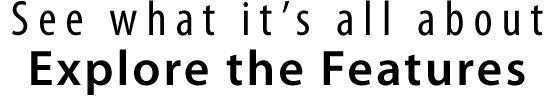
<style>
.page{position:relative;width:553px;height:99px;background:#ffffff}
.page>*{position:absolute;margin:0}
.t1{font:50px "MyriadPro-Cond";letter-spacing:0.18em;color:#000000}
.t2{font:50px/50px "MyriadPro-Semibold";letter-spacing:0.06em;color:#000000}
</style>
<div class="page">
<p class="t1" style="left:12px;top:0px;width:531px;height:95px;text-align:center">See what it’s all about<br><span class="t2">Explore the Features</span></p>
</div>
